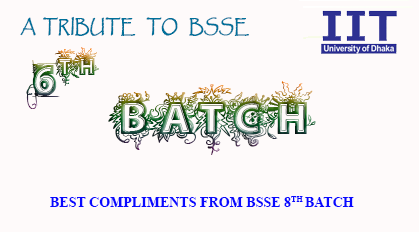
<style>
.page{position:relative;width:419px;height:232px;background:#fefafa}
.page>*{position:absolute;margin:0}
.t1{font:18.3px "Papyrus-Regular";color:#00709a;font-weight:bold;scale:0.82 1}
.t2{font:72px "vtksDejaVu"}
.t3{font:78.6px "vtksDejaVu";scale:1.04 1}
.t4{font:14px "TimesNewRomanPS-BoldMT";color:#0909ff}
</style>
<div class="page">
<p class="t1" style="left:20px;top:16px;width:229px;height:20px">A  TRIBUTE   TO   BSSE</p>
<p class="t1" style="left:20px;top:16px;width:229px;height:20px">A  TRIBUTE   TO   BSSE</p>
<p class="t2" style="left:26px;top:47px;width:73px;height:62px">6TH</p>
<p class="t2" style="left:26px;top:47px;width:73px;height:62px">6TH</p>
<p class="t3" style="left:108px;top:81px;width:208px;height:74px">BATCH</p>
<p class="t3" style="left:108px;top:81px;width:208px;height:74px">BATCH</p>
<p class="t4" style="left:50px;top:196px;width:304px;height:11px">BEST COMPLIMENTS FROM BSSE 8TH BATCH</p>
</div>
